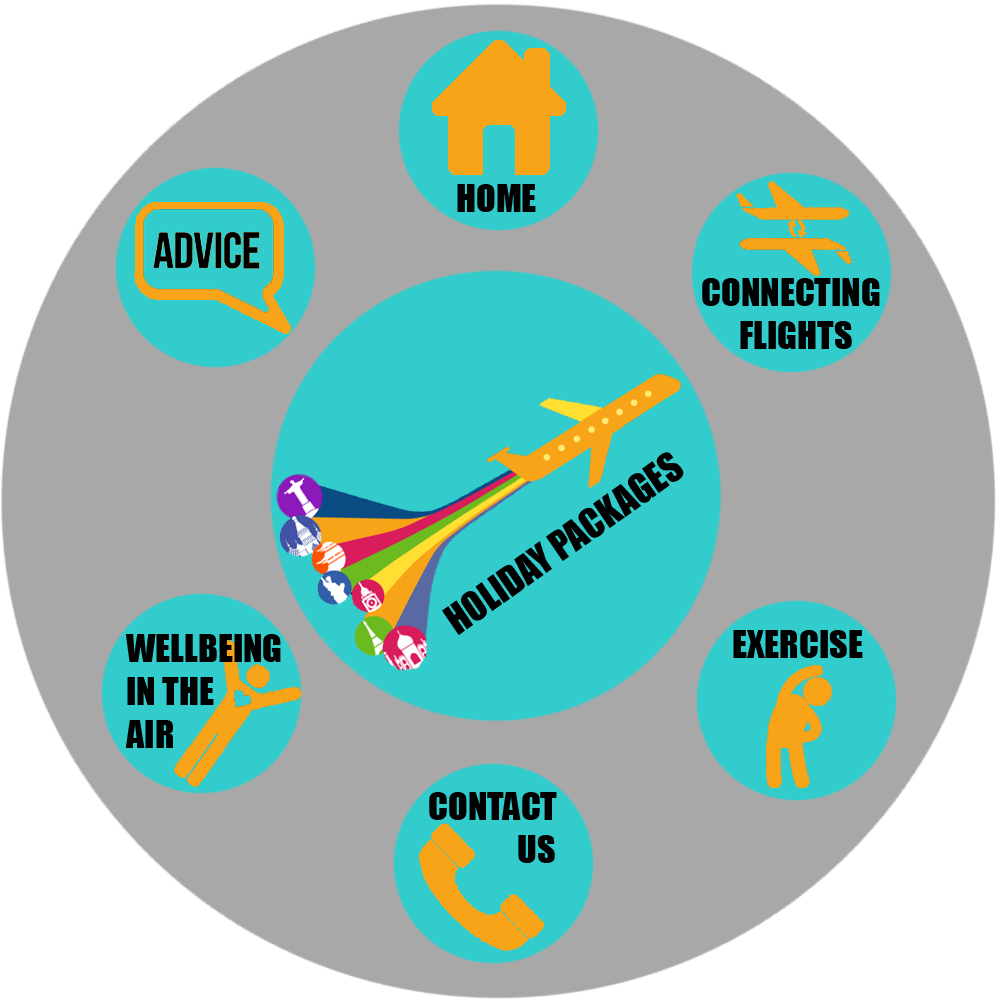
<style>
.page{position:relative;width:1000px;height:1000px;background:#a8a8a8}
.page>*{position:absolute;margin:0}
.t1{font:36px "Impact";color:#010101}
.t2{font:36px "Impact";color:#000000}
.t3{font:37.6px "Impact";color:#000000}
</style>
<div class="page">
<p class="t1" style="left:457px;top:184px;width:79px;height:28px">HOME</p>
<p class="t2" style="left:702px;top:278px;width:178px;height:71px">CONNECTING <br>      FLIGHTS</p>
<p class="t3" style="left:442px;top:452px;width:242px;height:183px;rotate:-35deg">HOLIDAY PACKAGES</p>
<p class="t2" style="left:733px;top:630px;width:130px;height:28px">EXERCISE</p>
<p class="t2" style="left:125px;top:634px;width:156px;height:114px">WELLBEING<br>IN THE<br>AIR</p>
<p class="t2" style="left:429px;top:792px;width:128px;height:71px">CONTACT <br>              US</p>
</div>
